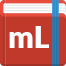
<style>
.page{position:relative;width:66px;height:66px;background:#c0392b}
.page>*{position:absolute;margin:0}
.t1{font:30px "Lato-Black";color:#ffffff}
</style>
<div class="page">
<p class="t1" style="left:9px;top:26px;width:40px;height:22px">mL</p>
</div>
